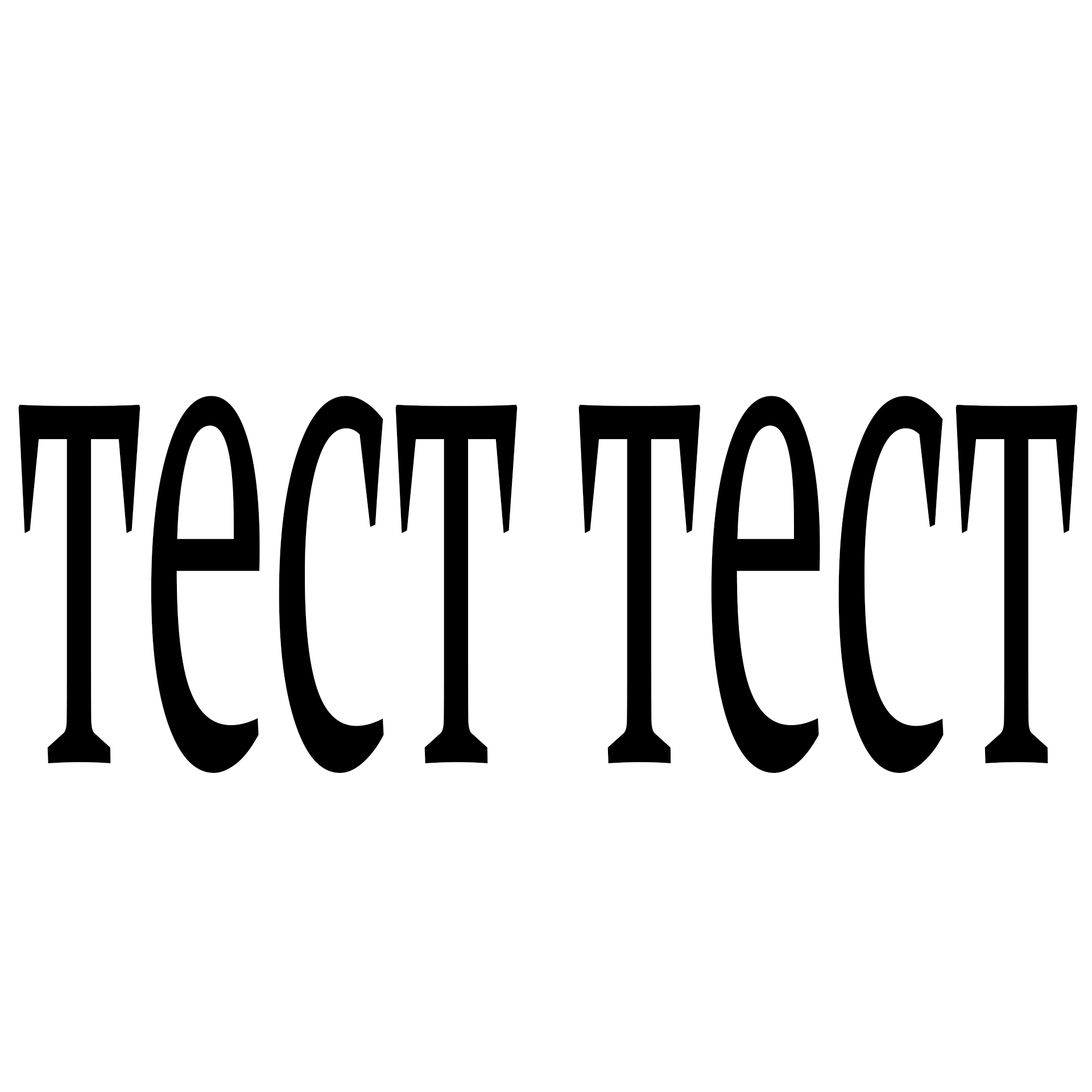
<style>
.page{position:relative;width:1092px;height:1092px;background:#ffffff}
.page>*{position:absolute;margin:0}
.t1{font:789.5px "Constantia";color:#000000;scale:0.34 1}
</style>
<div class="page">
<p class="t1" style="left:18px;top:396px;width:1060px;height:377px">тест тест</p>
</div>
